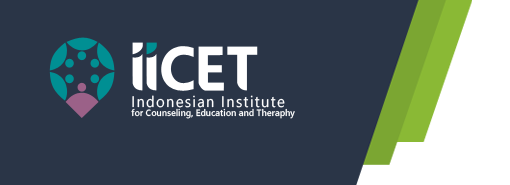
<style>
.page{position:relative;width:510px;height:185px;background:#2a3547}
.page>*{position:absolute;margin:0}
.t1{font:15.3px "SegoeUI";letter-spacing:0.09em;color:#fffefe;scale:0.96 1}
.t2{font:9.4px "SegoeUI-Semibold";color:#ffffff;scale:0.96 1}
</style>
<div class="page">
<p class="t1" style="left:132px;top:95px;width:153px;height:13px">Indonesian Institute</p>
<p class="t2" style="left:131px;top:108px;width:164px;height:11px">for Counseling, Education and Theraphy</p>
</div>
